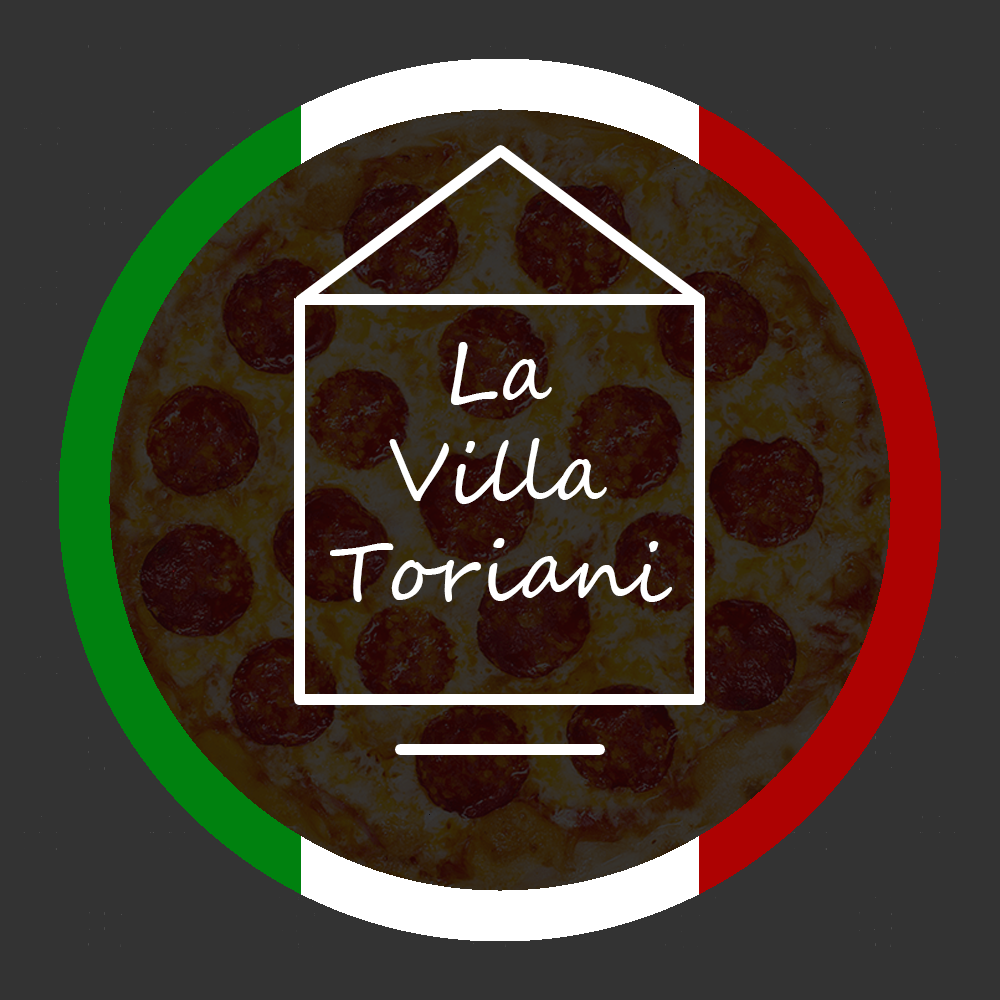
<style>
.page{position:relative;width:1000px;height:1000px;background:#333333}
.page>*{position:absolute;margin:0}
.t1{font:83.3px "SegoeScript";color:#ffffff}
</style>
<div class="page">
<p class="t1" style="left:330px;top:342px;width:342px;height:260px;text-align:center">La<br>Villa<br>Toriani</p>
</div>
